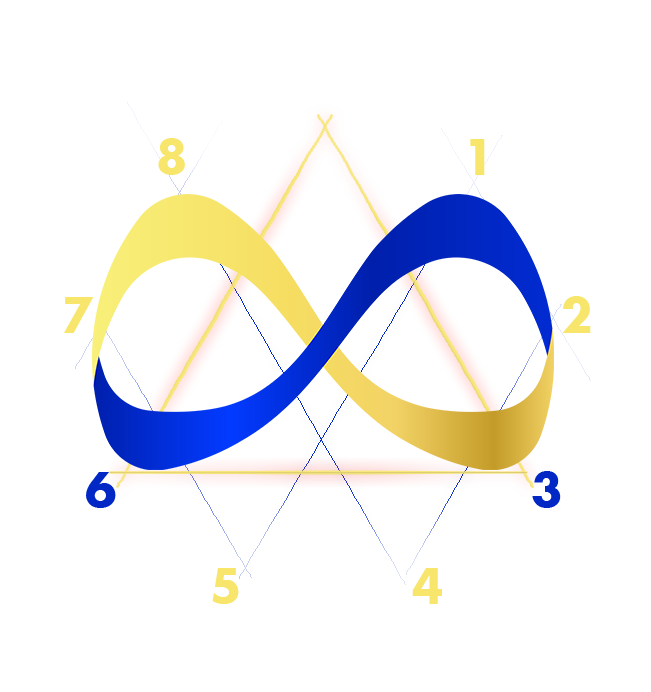
<style>
.page{position:relative;width:651px;height:692px;background:#ffffff}
.page>*{position:absolute;margin:0}
.t1{font:45.7px "SFUFuturaBold";color:#f7e56c}
.t2{font:45.7px "SFUFuturaBold";color:#0127c5}
</style>
<div class="page">
<p class="t1" style="left:158px;top:138px;width:27px;height:37px">8</p>
<p class="t1" style="left:470px;top:139px;width:15px;height:36px">1</p>
<p class="t1" style="left:64px;top:297px;width:30px;height:36px">7</p>
<p class="t1" style="left:562px;top:296px;width:29px;height:37px">2</p>
<p class="t2" style="left:86px;top:472px;width:30px;height:36px">6</p>
<p class="t2" style="left:532px;top:471px;width:29px;height:37px">3</p>
<p class="t1" style="left:212px;top:568px;width:27px;height:36px">5</p>
<p class="t1" style="left:412px;top:568px;width:30px;height:36px">4</p>
</div>
